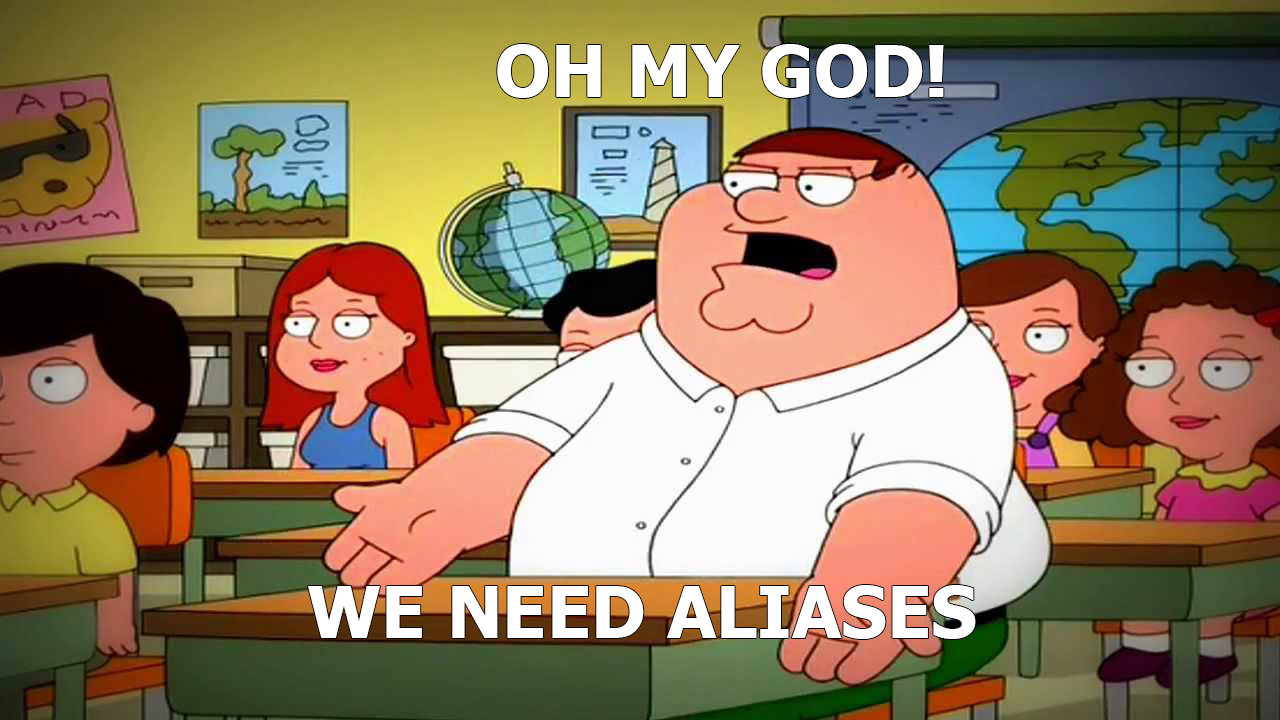
<style>
.page{position:relative;width:1280px;height:720px}
.page>*{position:absolute;margin:0}
.t1{font:72px "Tahoma-Bold";color:#ffffff}
</style>
<div class="page">
<p class="t1" style="left:497px;top:44px;width:447px;height:54px">OH MY GOD!</p>
<p class="t1" style="left:308px;top:585px;width:668px;height:54px">WE NEED ALIASES</p>
</div>
